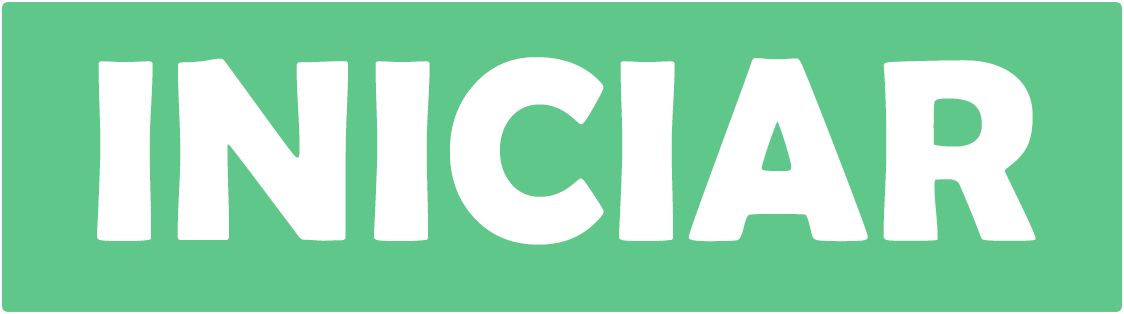
<style>
.page{position:relative;width:1124px;height:314px;background:#5fc789}
.page>*{position:absolute;margin:0}
.t1{font:260.7px "BerlinSansFBDemi-Bold";letter-spacing:0.01em;color:#ffffff}
</style>
<div class="page">
<p class="t1" style="left:97px;top:57px;width:939px;height:188px">INICIAR</p>
</div>
